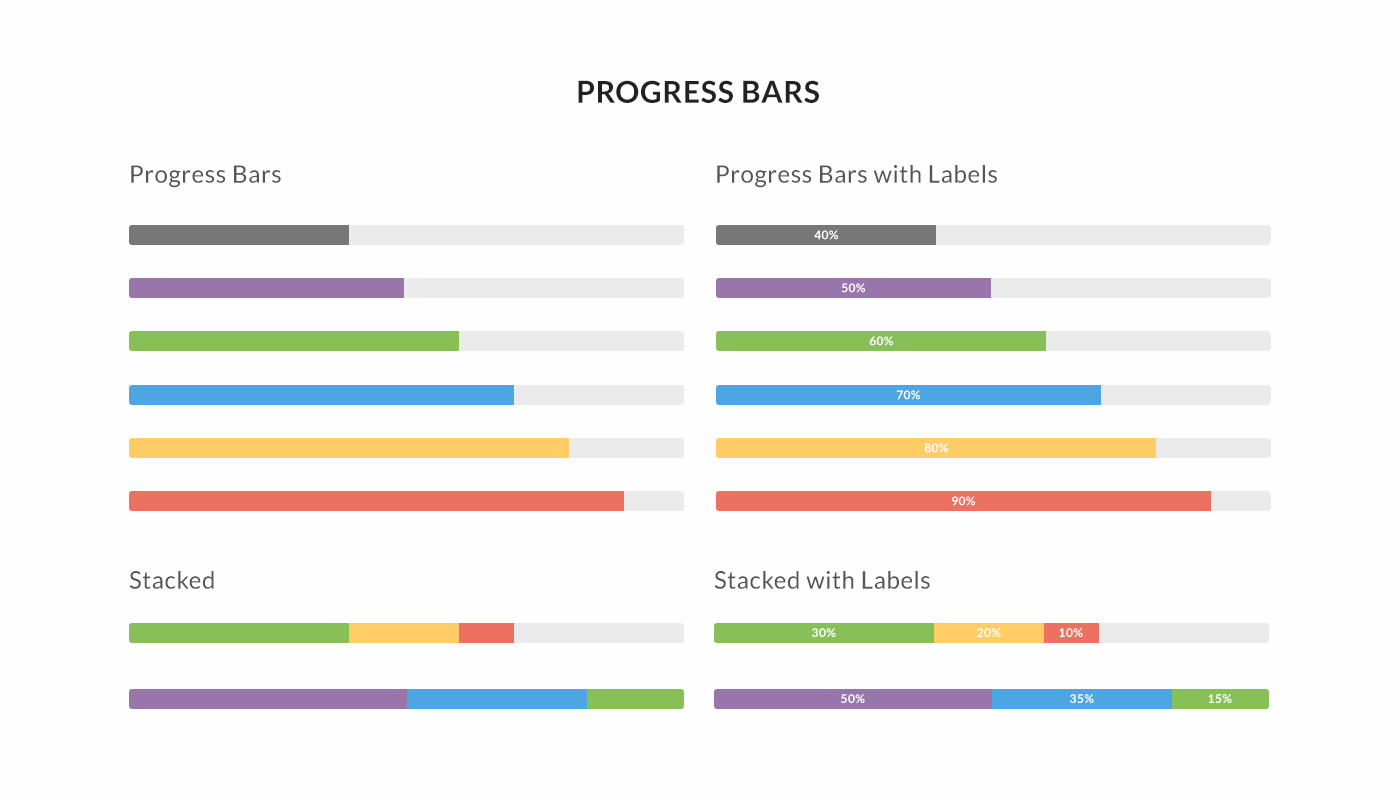
<style>
.page{position:relative;width:1400px;height:800px;background:#fefefe}
.page>*{position:absolute;margin:0}
.t1{font:30px "Lato-Bold";letter-spacing:0.025em;color:#222222}
.t2{font:24px "Lato-Regular";letter-spacing:0.025em;color:#555555}
.t3{font:12px "Lato-Bold";letter-spacing:0.025em;color:#ffffff}
</style>
<div class="page">
<p class="t1" style="left:578px;top:80px;width:241px;height:23px">PROGRESS BARS</p>
<p class="t2" style="left:131px;top:165px;width:150px;height:23px">Progress Bars</p>
<p class="t2" style="left:717px;top:165px;width:280px;height:23px">Progress Bars with Labels</p>
<p class="t3" style="left:814px;top:230px;width:24px;height:10px">40%</p>
<p class="t3" style="left:841px;top:283px;width:24px;height:10px">50%</p>
<p class="t3" style="left:869px;top:336px;width:24px;height:10px">60%</p>
<p class="t3" style="left:896px;top:390px;width:24px;height:10px">70%</p>
<p class="t3" style="left:924px;top:443px;width:24px;height:10px">80%</p>
<p class="t3" style="left:952px;top:496px;width:23px;height:10px">90%</p>
<p class="t2" style="left:129px;top:571px;width:85px;height:18px">Stacked</p>
<p class="t2" style="left:714px;top:571px;width:216px;height:18px">Stacked with Labels</p>
<p class="t3" style="left:812px;top:628px;width:24px;height:9px">30%</p>
<p class="t3" style="left:977px;top:628px;width:24px;height:9px">20%</p>
<p class="t3" style="left:1059px;top:628px;width:24px;height:9px">10%</p>
<p class="t3" style="left:841px;top:694px;width:24px;height:9px">50%</p>
<p class="t3" style="left:1070px;top:694px;width:24px;height:9px">35%</p>
<p class="t3" style="left:1208px;top:694px;width:24px;height:9px">15%</p>
</div>
